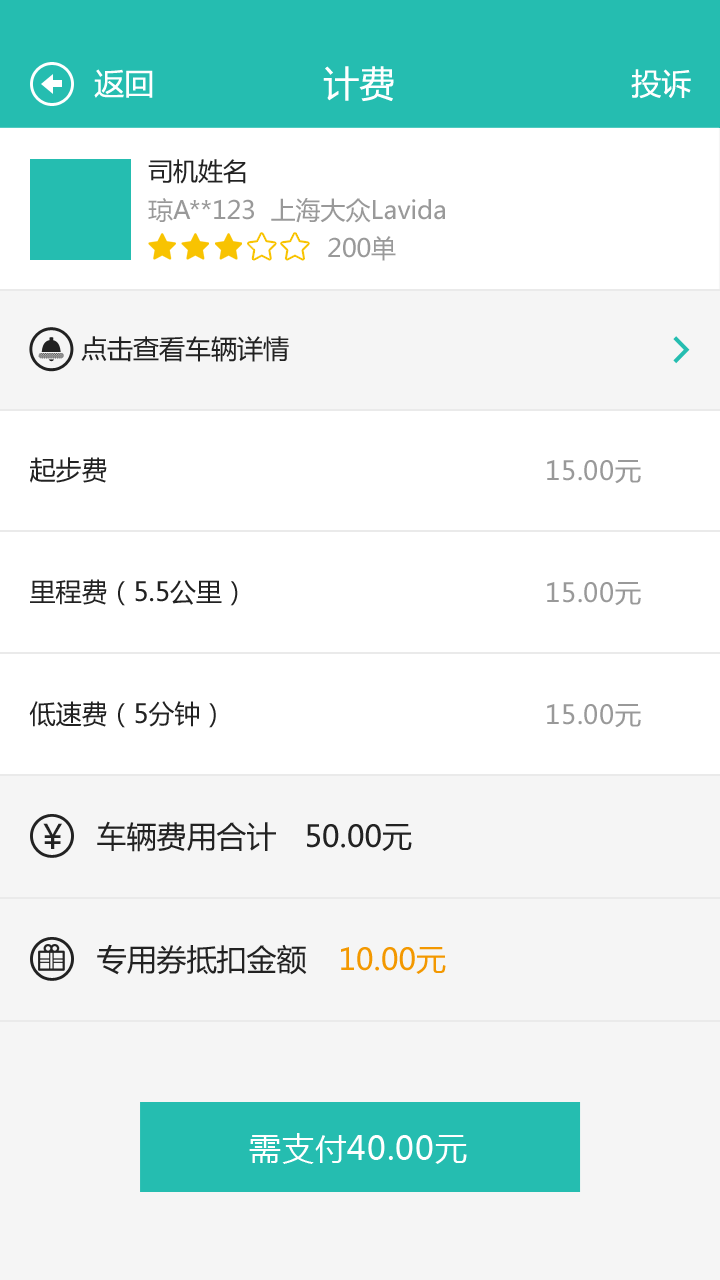
<style>
.page{position:relative;width:720px;height:1280px;background:#f5f5f5}
.page>*{position:absolute;margin:0}
.t1{font:30px "MicrosoftYaHei";color:#ffffff}
.t2{font:36px "MicrosoftYaHei";color:#ffffff}
.t3{font:25px "MicrosoftYaHei";color:#222222}
.t4{font:25px "MicrosoftYaHei";color:#999999}
.t5{font:26px "MicrosoftYaHei";color:#222222}
.t6{font:26px "MicrosoftYaHei";color:#999999}
.t7{font:30px "MicrosoftYaHei";color:#222222}
.t8{font:30px "MicrosoftYaHei";color:#f39800}
.t9{font:32px "MicrosoftYaHei";letter-spacing:0.02em;color:#ffffff}
</style>
<div class="page">
<p class="t1" style="left:94px;top:69px;width:59px;height:29px">返回</p>
<p class="t2" style="left:323px;top:66px;width:71px;height:36px">计费</p>
<p class="t1" style="left:631px;top:69px;width:60px;height:30px">投诉</p>
<p class="t3" style="left:148px;top:159px;width:98px;height:25px">司机姓名</p>
<p class="t4" style="left:148px;top:198px;width:297px;height:25px">琼A**123  上海大众Lavida</p>
<p class="t4" style="left:328px;top:236px;width:68px;height:25px">200单</p>
<p class="t5" style="left:81px;top:336px;width:208px;height:26px">点击查看车辆详情</p>
<p class="t5" style="left:30px;top:457px;width:77px;height:26px">起步费</p>
<p class="t6" style="left:547px;top:460px;width:94px;height:24px">15.00元</p>
<p class="t5" style="left:30px;top:579px;width:208px;height:27px">里程费（5.5公里）</p>
<p class="t6" style="left:547px;top:582px;width:94px;height:24px">15.00元</p>
<p class="t5" style="left:29px;top:701px;width:187px;height:27px">低速费（5分钟）</p>
<p class="t6" style="left:547px;top:704px;width:94px;height:24px">15.00元</p>
<p class="t7" style="left:97px;top:821px;width:179px;height:31px">车辆费用合计</p>
<p class="t7" style="left:307px;top:824px;width:105px;height:27px">50.00元</p>
<p class="t7" style="left:97px;top:944px;width:210px;height:31px">专用券抵扣金额</p>
<p class="t8" style="left:341px;top:947px;width:105px;height:27px">10.00元</p>
<p class="t9" style="left:249px;top:1133px;width:218px;height:31px">需支付40.00元</p>
</div>
